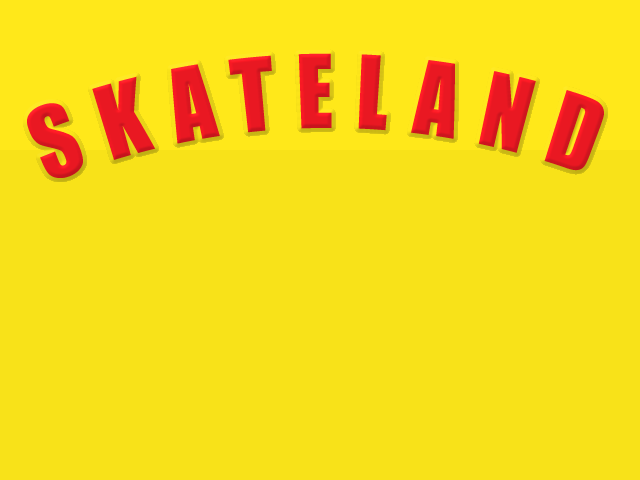
<style>
.page{position:relative;width:640px;height:480px;background:#f8e219}
.page>*{position:absolute;margin:0}
.t1{font:93px "Impact";letter-spacing:0.28em;color:#ff1a25;text-transform:uppercase;scale:0.83 1}
</style>
<div class="page">
<p class="t1" style="left:27px;top:53px;width:577px;height:125px">skateland</p>
</div>
